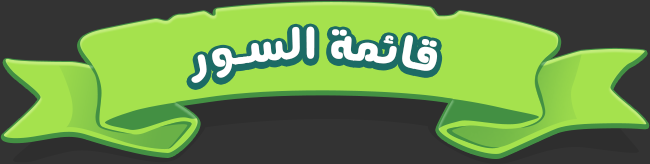
<style>
.page{position:relative;width:650px;height:164px;background:#a5e24d}
.page>*{position:absolute;margin:0}
.t1{font:48px "ANegaar-Bold";letter-spacing:0.05em;color:#ffffff}
</style>
<div class="page">
<p class="t1" style="left:191px;top:26px;width:247px;height:57px">قائمة السور</p>
</div>
